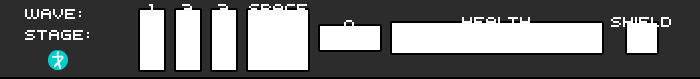
<style>
.page{position:relative;width:700px;height:79px;background:#2c2c2c}
.page>*{position:absolute;margin:0}
.t1{font:16px "Kroeger0553";color:#ffffff}
.t2{font:15.8px "Kroeger0553";color:#ffffff}
.t3{font:16.3px "Kroeger0553";color:#ffffff}
</style>
<div class="page">
<p class="t1" style="left:149px;top:4px;width:4px;height:10px">1</p>
<p class="t1" style="left:182px;top:4px;width:10px;height:10px">2</p>
<p class="t1" style="left:218px;top:4px;width:10px;height:10px">3</p>
<p class="t1" style="left:249px;top:4px;width:58px;height:10px">SPACE</p>
<p class="t2" style="left:25px;top:9px;width:56px;height:10px">WAVE:</p>
<p class="t1" style="left:462px;top:17px;width:68px;height:10px">HEALTH</p>
<p class="t3" style="left:611px;top:17px;width:60px;height:10px">SHIELD</p>
<p class="t2" style="left:25px;top:30px;width:64px;height:10px">STAGE:</p>
<p class="t1" style="left:344px;top:20px;width:10px;height:12px">Q</p>
</div>
